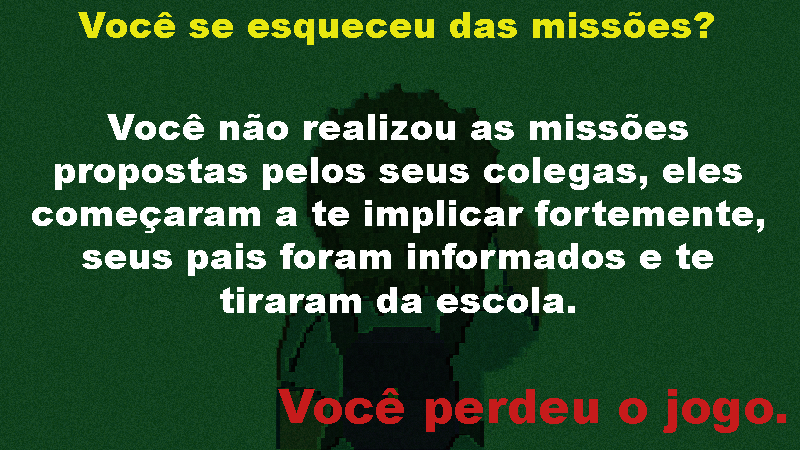
<style>
.page{position:relative;width:800px;height:450px}
.page>*{position:absolute;margin:0}
.t1{font:36px "Arial-Black";color:#e8e810}
.t2{font:36px "Arial-Black";color:#ffffff}
.t3{font:47.2px "Arial-Black";color:#c61b1b}
</style>
<div class="page">
<p class="t1" style="left:78px;top:12px;width:636px;height:33px">Você se esqueceu das missões?</p>
<p class="t2" style="left:32px;top:114px;width:732px;height:199px;text-align:center">Você não realizou as missões propostas pelos seus colegas, eles começaram a te implicar fortemente, seus pais foram informados e te tiraram da escola.</p>
<p class="t3" style="left:278px;top:388px;width:508px;height:45px">Você perdeu o jogo.</p>
</div>
